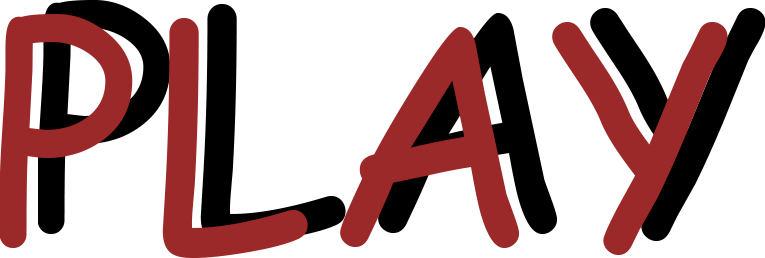
<style>
.page{position:relative;width:765px;height:258px;background:#ffffff}
.page>*{position:absolute;margin:0}
.t1{font:300px "ComicSansMS";letter-spacing:0.025em;color:#9c2929}
</style>
<div class="page">
<p class="t1" style="left:0px;top:14px;width:728px;height:244px">PLAY</p>
</div>
